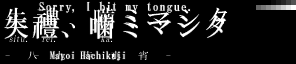
<style>
.page{position:relative;width:296px;height:64px;background:#000000}
.page>*{position:absolute;margin:0}
.t1{font:12px/11px "HGMinchoB";letter-spacing:0.075em;color:#ffffff}
.t2{font:26px/14px "HGMinchoB";letter-spacing:0.1em;color:#ffffff}
.t3{font:10px "HGMinchoB";letter-spacing:0.01em;color:#ffffff}
</style>
<div class="page">
<p class="t1" style="left:4px;top:1px;width:222px;height:38px;text-align:center">Sorry, I bit my tongue.  <br><br><span class="t2">失禮、噛ミマシタ</span></p>
<p class="t3" style="left:50px;top:51px;width:75px;height:10px">Mayoi Hachikuji</p>
</div>
